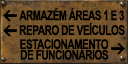
<style>
.page{position:relative;width:128px;height:64px}
.page>*{position:absolute;margin:0}
.t1{font:13.3px "Arial-BoldMT";letter-spacing:-0.04em;color:#000000;text-transform:uppercase;scale:0.73 1}
.t2{font:13.3px "Arial-BoldMT";letter-spacing:-0.04em;color:#000000;text-transform:uppercase;scale:0.75 1}
.t3{font:13.3px/10.7px "Arial-BoldMT";letter-spacing:-0.04em;color:#000000;text-transform:uppercase;scale:0.75 1}
</style>
<div class="page">
<p class="t1" style="left:19px;top:8px;width:106px;height:13px">armazém áreaS 1 e 3</p>
<p class="t2" style="left:19px;top:22px;width:106px;height:14px">reparo de veículoS</p>
<p class="t3" style="left:20px;top:39px;width:89px;height:21px;text-align:right">Estacionamento<br>DE funcionários</p>
</div>
